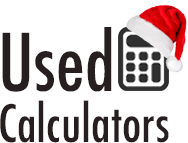
<style>
.page{position:relative;width:188px;height:143px;background:#ffffff}
.page>*{position:absolute;margin:0}
.t1{font:77.2px "Futura-CondensedMedium";color:#271f1f}
.t2{font:50px "Futura-CondensedMedium";color:#271f1f}
</style>
<div class="page">
<p class="t1" style="left:2px;top:27px;width:110px;height:65px">Used</p>
<p class="t2" style="left:0px;top:100px;width:169px;height:43px">Calculators</p>
</div>
